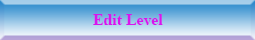
<style>
.page{position:relative;width:255px;height:40px}
.page>*{position:absolute;margin:0}
.t1{font:15.8px "TimesNewRomanPS-BoldMT";color:#d815ed}
</style>
<div class="page">
<p class="t1" style="left:93px;top:14px;width:70px;height:11px">Edit Level</p>
</div>
